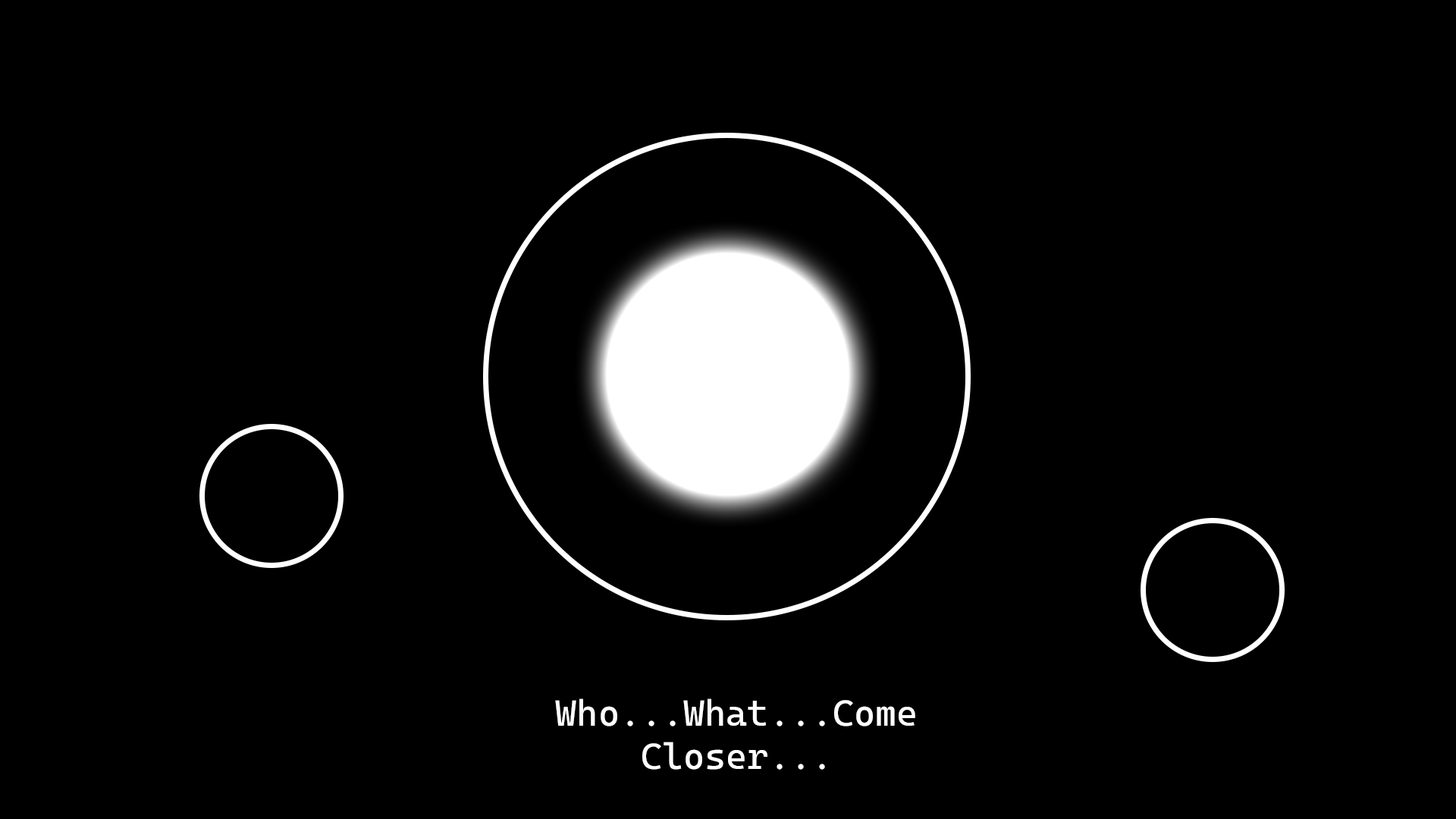
<style>
.page{position:relative;width:1456px;height:819px;background:#000000}
.page>*{position:absolute;margin:0}
.t1{font:36.4px "CascadiaMono-Regular";color:#ffffff}
</style>
<div class="page">
<p class="t1" style="left:555px;top:698px;width:360px;height:72px;text-align:center">Who...What...Come Closer...</p>
</div>
